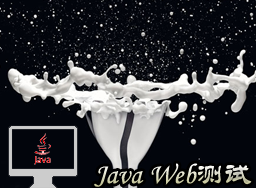
<style>
.page{position:relative;width:256px;height:188px;background:#02050c}
.page>*{position:absolute;margin:0}
.t1{font:28.4px "STLiti"}
</style>
<div class="page">
<p class="t1" style="left:94px;top:163px;width:158px;height:24px">Java Web测试</p>
</div>
